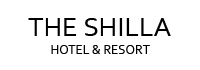
<style>
.page{position:relative;width:200px;height:70px;background:#ffffff}
.page>*{position:absolute;margin:0}
.t1{font:28px "Corbel";color:#000000}
.t2{font:13px "Corbel";color:#000000}
</style>
<div class="page">
<p class="t1" style="left:28px;top:18px;width:143px;height:18px">THE SHILLA</p>
<p class="t2" style="left:51px;top:45px;width:99px;height:9px">HOTEL &amp; RESORT</p>
</div>
